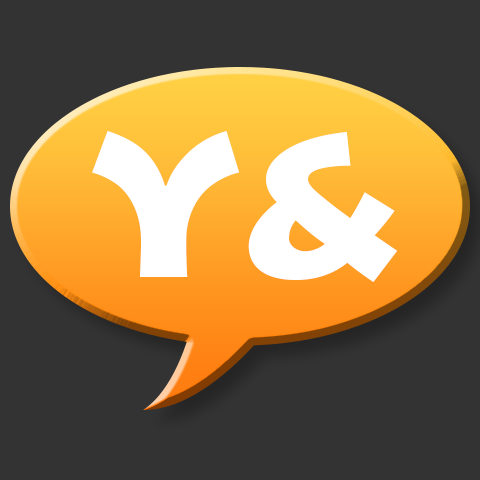
<style>
.page{position:relative;width:480px;height:480px;background:#333333}
.page>*{position:absolute;margin:0}
.t1{font:201px "LithosPro-Black";color:#ffffff}
.t2{font:32px "Alef-Bold";color:#ffffff}
</style>
<div class="page">
<p class="t1" style="left:92px;top:131px;width:306px;height:151px"><span class="t2"><br><br><br><br></span>Y&amp;</p>
</div>
